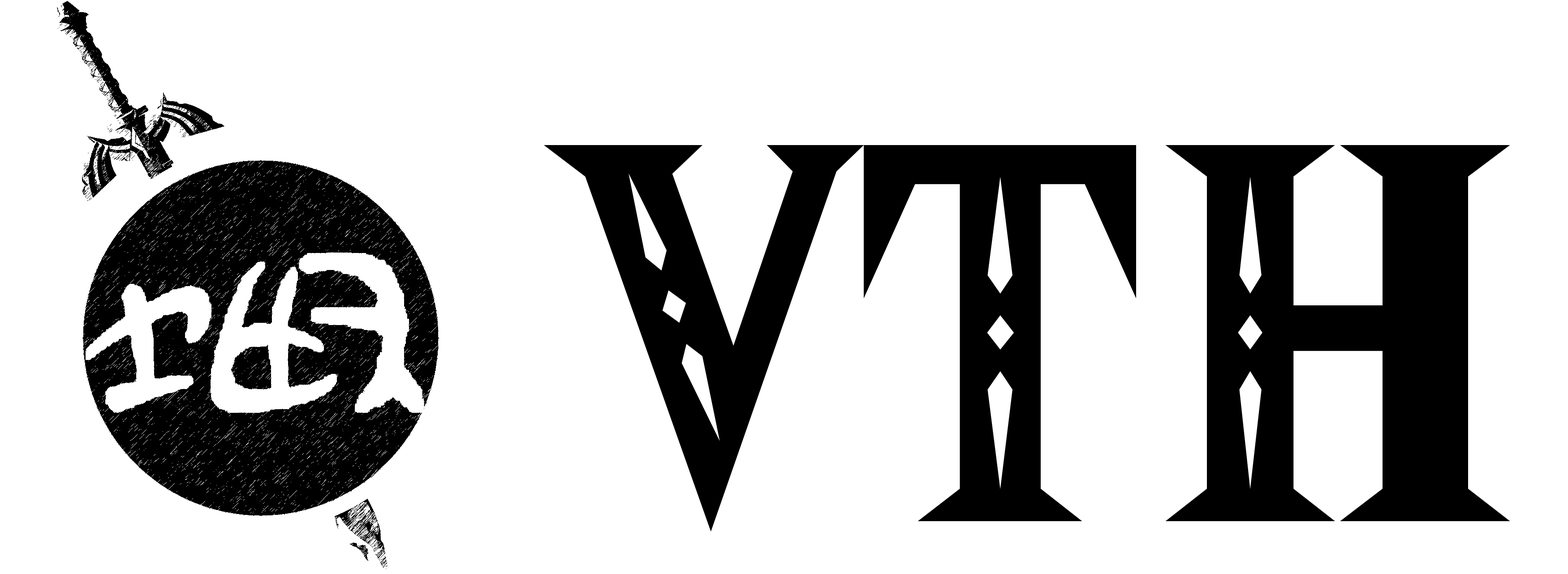
<style>
.page{position:relative;width:1568px;height:574px;background:#ffffff}
.page>*{position:absolute;margin:0}
.t1{font:470.4px "HyliaSerifBeta-Regular";letter-spacing:0.025em;color:#000000}
</style>
<div class="page">
<p class="t1" style="left:544px;top:145px;width:966px;height:387px">VTH</p>
</div>
